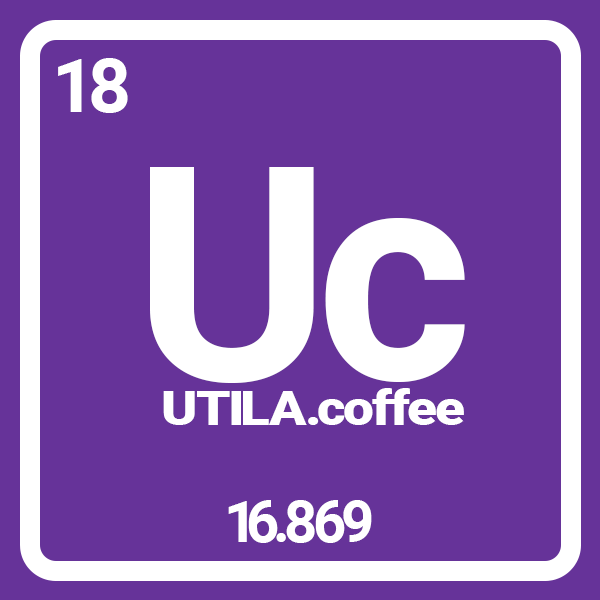
<style>
.page{position:relative;width:600px;height:600px;background:#663399}
.page>*{position:absolute;margin:0}
.t1{font:75px "Roboto-Bold";letter-spacing:-0.1em;color:#ffffff}
.t2{font:300px "Roboto-Bold";letter-spacing:-0.04em;color:#ffffff}
.t3{font:47.5px "Roboto-Black";letter-spacing:-0.04em;color:#ffffff;scale:1.16 1}
.t4{font:47.5px "Roboto-Black";letter-spacing:-0.095em;color:#ffffff;scale:1.16 1}
.t5{font:47.5px "Roboto-Black";letter-spacing:-0.015em;color:#ffffff;scale:1.16 1}
.t6{font:47.5px "Roboto-Black";letter-spacing:-0.024em;color:#ffffff;scale:1.16 1}
.t7{font:47.5px "Roboto-Black";letter-spacing:-0.09em;color:#ffffff;scale:1.16 1}
.t8{font:58.3px "Roboto-Bold";letter-spacing:-0.11em;color:#ffffff}
.t9{font:58.3px "Roboto-Bold";letter-spacing:-0.2em;color:#ffffff}
.t10{font:58.3px "Roboto-Bold";letter-spacing:-0.08em;color:#ffffff}
.t11{font:58.3px "Roboto-Bold";letter-spacing:-0.09em;color:#ffffff}
</style>
<div class="page">
<p class="t1" style="left:58px;top:58px;width:70px;height:55px">18</p>
<p class="t2" style="left:150px;top:167px;width:164px;height:216px">U</p>
<p class="t2" style="left:325px;top:218px;width:140px;height:164px">c</p>
<p class="t3" style="left:163px;top:388px;width:301px;height:37px">UT<span class="t4">I</span><span class="t5">L</span><span class="t6">A</span><span class="t7">.</span>coffee</p>
<p class="t8" style="left:228px;top:500px;width:144px;height:43px"><span class="t9">1</span>6.<span class="t10">8</span><span class="t11">69</span></p>
</div>
